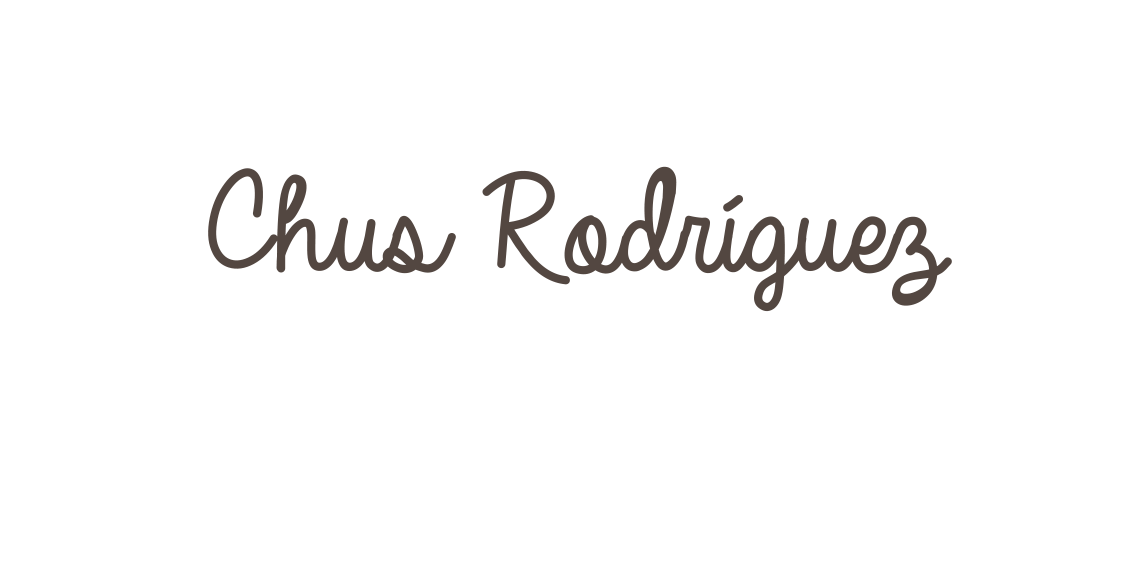
<style>
.page{position:relative;width:1134px;height:567px;background:#ffffff}
.page>*{position:absolute;margin:0}
.t1{font:150px "AlwaysInMyHeart";color:#534741}
</style>
<div class="page">
<p class="t1" style="left:208px;top:166px;width:744px;height:146px">Chus Rodríguez</p>
</div>
